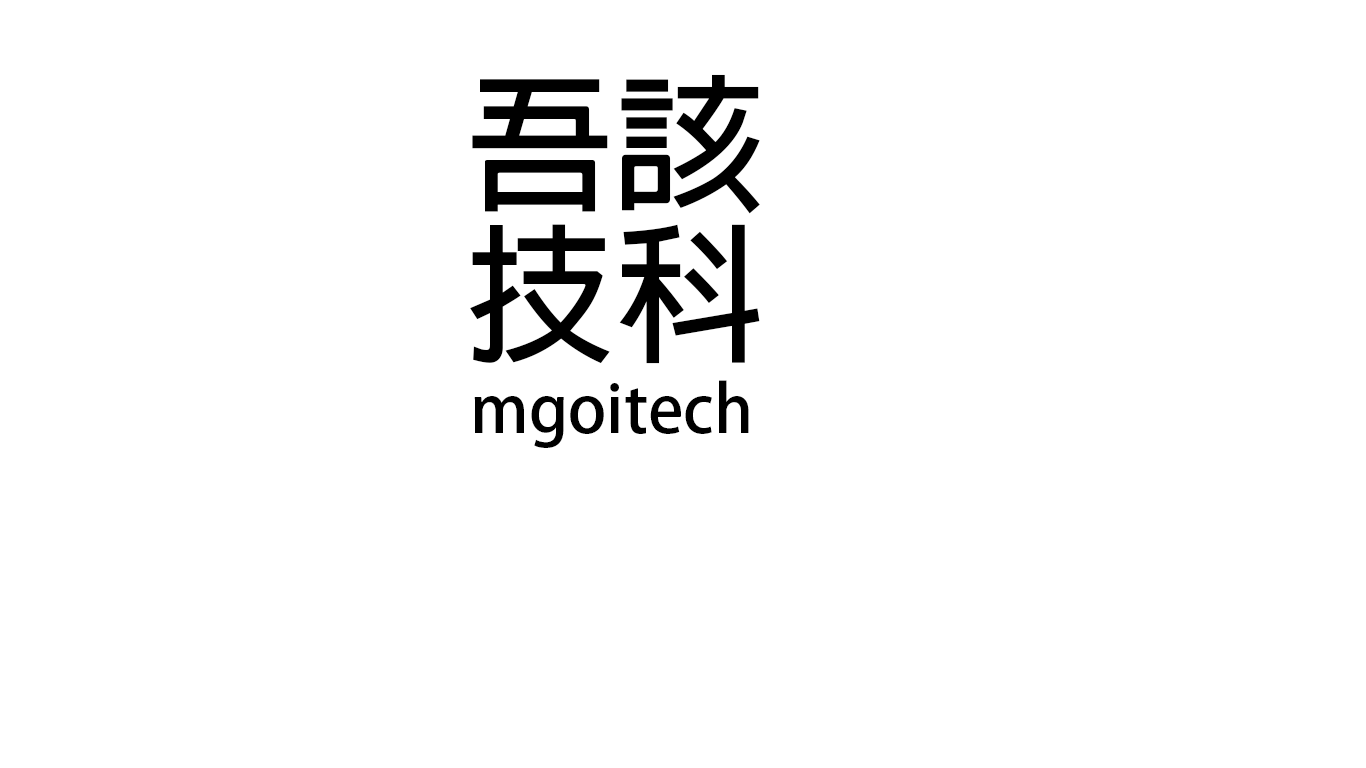
<style>
.page{position:relative;width:1366px;height:768px;background:#ffffff}
.page>*{position:absolute;margin:0}
.t1{font:150px/150px "AdobeFanHeitiStd-Bold";color:#000000}
.t2{font:65px "AdobeFanHeitiStd-Bold";color:#000000}
</style>
<div class="page">
<p class="t1" style="left:470px;top:74px;width:290px;height:290px;text-align:center">吾該<br>技科</p>
<p class="t2" style="left:474px;top:380px;width:275px;height:68px">mgoitech</p>
</div>
